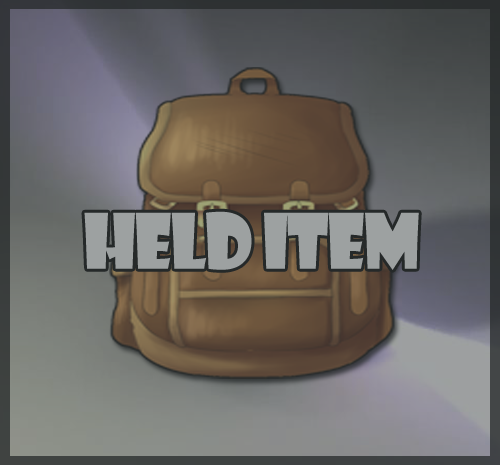
<style>
.page{position:relative;width:500px;height:465px}
.page>*{position:absolute;margin:0}
.t1{font:74.7px "ShowcardGothic-Reg";letter-spacing:-0.025em;color:#9da1a1;scale:0.91 1}
</style>
<div class="page">
<p class="t1" style="left:84px;top:211px;width:335px;height:59px">Held Item</p>
</div>
